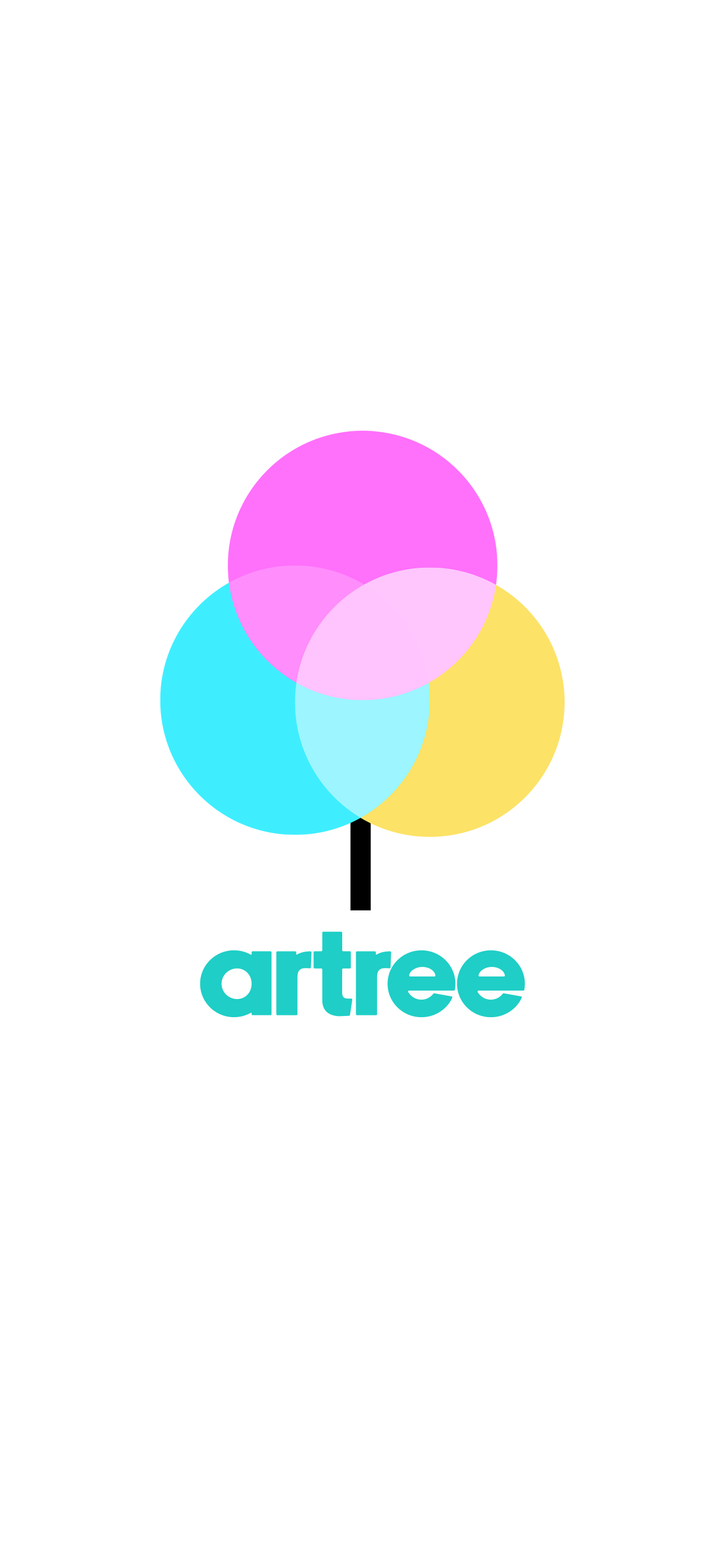
<style>
.page{position:relative;width:725px;height:1568px;background:#ffffff}
.page>*{position:absolute;margin:0}
.t1{font:120.8px "NewakeDemo";letter-spacing:-0.02em;color:#1fcec6}
</style>
<div class="page">
<p class="t1" style="left:200px;top:931px;width:325px;height:87px">artree</p>
</div>
